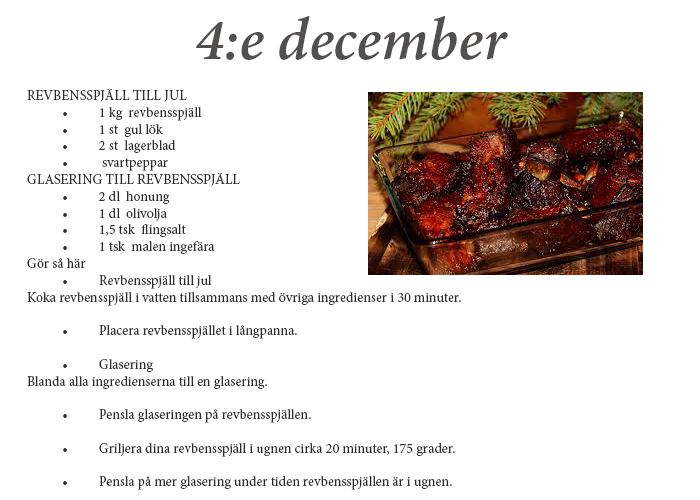
<style>
.page{position:relative;width:700px;height:500px;background:#ffffff}
.page>*{position:absolute;margin:0}
.t1{font:60px "MinionPro-SemiboldIt";color:#524f4f}
.t2{font:14px "MinionPro-Regular";color:#2d2b2b}
.t3{font:12px "MinionPro-SemiboldIt";color:#524f4f}
</style>
<div class="page">
<p class="t1" style="left:196px;top:16px;width:312px;height:44px">4:e december</p>
<p class="t2" style="left:27px;top:89px;width:434px;height:401px"><span class="t3"><br></span>REVBENSSPJÄLL TILL JUL<br> • 1 kg  revbensspjäll<br> • 1 st  gul lök<br> • 2 st  lagerblad<br> •  svartpeppar<br>GLASERING TILL REVBENSSPJÄLL<br> • 2 dl  honung<br> • 1 dl  olivolja<br> • 1,5 tsk  flingsalt<br> • 1 tsk  malen ingefära<br>Gör så här<br> • Revbensspjäll till jul<br>Koka revbensspjäll i vatten tillsammans med övriga ingredienser i 30 minuter. <br><br> • Placera revbensspjället i långpanna. <br><br> • Glasering<br>Blanda alla ingredienserna till en glasering. <br><br> • Pensla glaseringen på revbensspjällen. <br><br> • Griljera dina revbensspjäll i ugnen cirka 20 minuter, 175 grader. <br><br> • Pensla på mer glasering under tiden revbensspjällen är i ugnen.</p>
</div>
